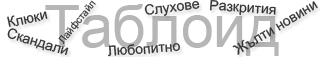
<style>
.page{position:relative;width:320px;height:57px;background:#ffffff}
.page>*{position:absolute;margin:0}
.t1{font:59px "ArialMT";color:#b6b6b6}
.t2{font:10px "ArialMT";color:#343434}
.t3{font:14px "ArialMT";color:#343434}
</style>
<div class="page">
<p class="t1" style="left:45px;top:4px;width:234px;height:52px">Tаблоид</p>
<p class="t2" style="left:58px;top:0px;width:38px;height:44px;rotate:-51deg">Лайфстайл</p>
<p class="t3" style="left:144px;top:0px;width:56px;height:16px;rotate:-7deg">Слухове</p>
<p class="t3" style="left:209px;top:0px;width:67px;height:16px;rotate:4deg">Разкрития</p>
<p class="t3" style="left:232px;top:1px;width:86px;height:54px;rotate:-31deg">Жълти новини</p>
<p class="t3" style="left:7px;top:11px;width:41px;height:16px;rotate:-12deg">Клюки</p>
<p class="t3" style="left:7px;top:28px;width:62px;height:27px;rotate:17deg">Скандали</p>
<p class="t3" style="left:108px;top:43px;width:72px;height:14px;rotate:-4deg">Любопитно</p>
</div>
